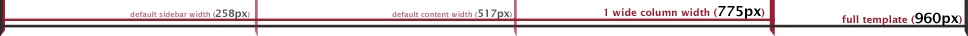
<style>
.page{position:relative;width:968px;height:36px;background:#ffffff}
.page>*{position:absolute;margin:0}
.t1{font:10px "LucidaSans-Demi";color:#981f32}
.t2{font:14px "LucidaSans-Demi";color:#000000}
.t3{font:7.3px "LucidaSans-Demi"}
.t4{font:10.2px "LucidaSans-Demi"}
</style>
<div class="page">
<p class="t1" style="left:604px;top:6px;width:161px;height:13px">1 wide column width (<span class="t2">775px</span>)</p>
<p class="t3" style="left:130px;top:9px;width:120px;height:10px">default sidebar width (<span class="t4">258px</span>)</p>
<p class="t3" style="left:392px;top:9px;width:120px;height:10px">default content width (<span class="t4">517px</span>)</p>
<p class="t1" style="left:842px;top:12px;width:120px;height:14px">full template (<span class="t2">960px</span>)</p>
</div>
